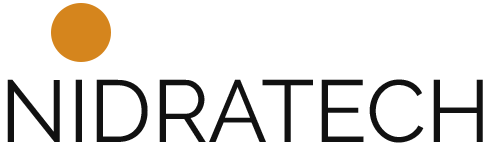
<style>
.page{position:relative;width:489px;height:147px;background:#ffffff}
.page>*{position:absolute;margin:0}
.t1{font:87.5px "Raleway-Regular";color:#111111}
</style>
<div class="page">
<p class="t1" style="left:7px;top:79px;width:476px;height:64px">NIDRATECH</p>
</div>
